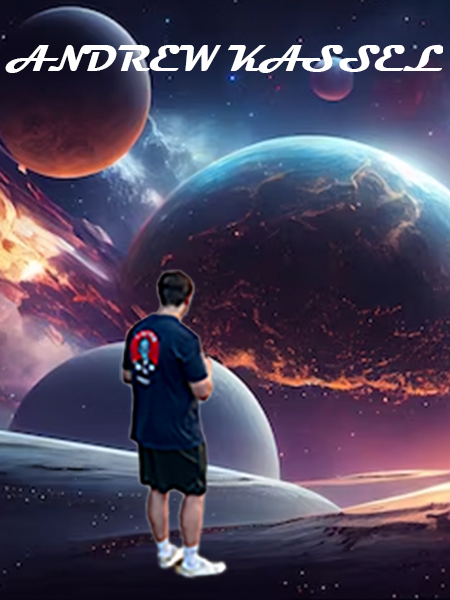
<style>
.page{position:relative;width:450px;height:600px}
.page>*{position:absolute;margin:0}
.t1{font:37.5px "Magneto-Bold";color:#ffffff}
</style>
<div class="page">
<p class="t1" style="left:5px;top:45px;width:438px;height:28px">ANDREW KASSEL</p>
</div>
